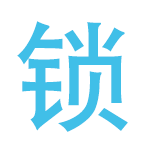
<style>
.page{position:relative;width:150px;height:150px;background:#ffffff}
.page>*{position:absolute;margin:0}
.t1{font:120px "AdobeHeitiStd-Regular";color:#40bfe8}
</style>
<div class="page">
<p class="t1" style="left:17px;top:21px;width:111px;height:111px">锁</p>
</div>
